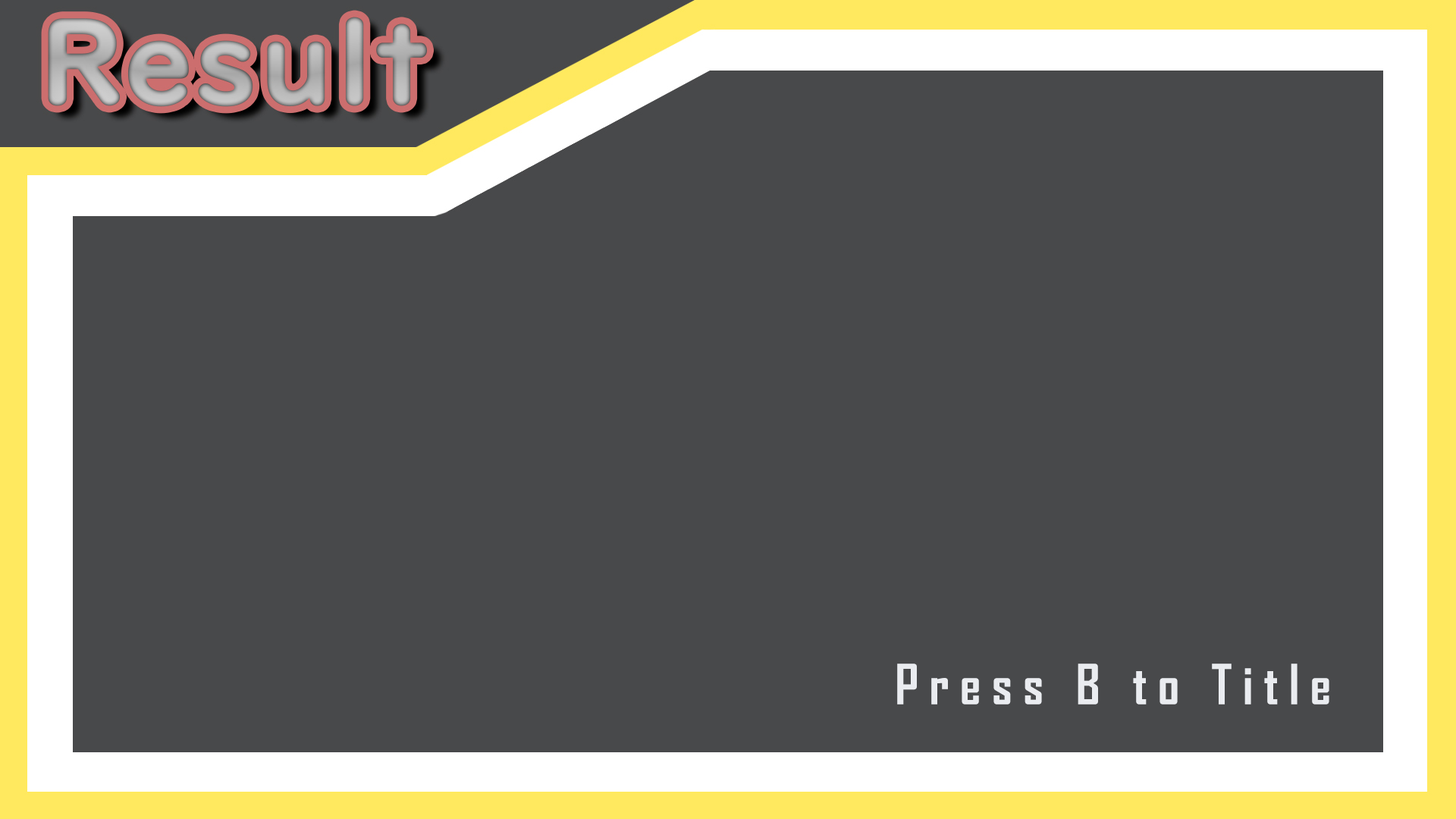
<style>
.page{position:relative;width:1456px;height:819px;background:#48494b}
.page>*{position:absolute;margin:0}
.t1{font:53.1px "AgencyFB-Bold";letter-spacing:0.2em;color:#eaecf0}
</style>
<div class="page">
<p class="t1" style="left:897px;top:664px;width:432px;height:40px">Press B to Title</p>
</div>
